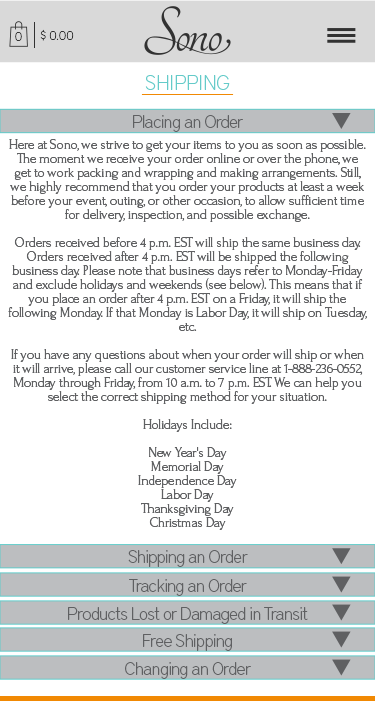
<style>
.page{position:relative;width:375px;height:718px;background:#ffffff}
.page>*{position:absolute;margin:0}
.t1{font:12.4px "DistrictPro-Thin";color:#323232}
.t2{font:21px "DistrictPro-Thin";color:#65cbc9}
.t3{font:18px "DistrictPro-Thin";letter-spacing:-0.031em;color:#5f6062}
.t4{font:14px/14px "Forum";letter-spacing:-0.031em;color:#5f6062}
</style>
<div class="page">
<p class="t1" style="left:40px;top:29px;width:34px;height:12px">$ 0.00</p>
<p class="t1" style="left:15px;top:32px;width:7px;height:9px">0</p>
<p class="t2" style="left:145px;top:75px;width:85px;height:15px">SHIPPING</p>
<p class="t3" style="left:133px;top:115px;width:110px;height:17px">Placing an Order</p>
<p class="t4" style="left:8px;top:139px;width:359px;height:391px;text-align:center">Here at Sono, we strive to get your items to you as soon as possible. The moment we receive your order online or over the phone, we get to work packing and wrapping and making arrangements. Still, we highly recommend that you order your products at least a week before your event, outing, or other occasion, to allow sufficient time for delivery, inspection, and possible exchange.<br><br>Orders received before 4 p.m. EST will ship the same business day. Orders received after 4 p.m. EST will be shipped the following business day. Please note that business days refer to Monday-Friday and exclude holidays and weekends (see below). This means that if you place an order after 4 p.m. EST on a Friday, it will ship the following Monday. If that Monday is Labor Day, it will ship on Tuesday, etc.<br><br>If you have any questions about when your order will ship or when it will arrive, please call our customer service line at 1-888-236-0552, Monday through Friday, from 10 a.m. to 7 p.m. EST. We can help you select the correct shipping method for your situation.<br><br>Holidays Include:<br><br>New Year's Day<br>Memorial Day<br>Independence Day<br>Labor Day<br>Thanksgiving Day<br>Christmas Day</p>
<p class="t3" style="left:128px;top:550px;width:120px;height:17px">Shipping an Order</p>
<p class="t3" style="left:129px;top:579px;width:118px;height:17px">Tracking an Order</p>
<p class="t3" style="left:68px;top:607px;width:240px;height:17px">Products Lost or Damaged in Transit</p>
<p class="t3" style="left:143px;top:634px;width:89px;height:17px">Free Shipping</p>
<p class="t3" style="left:125px;top:662px;width:126px;height:17px">Changing an Order</p>
</div>
